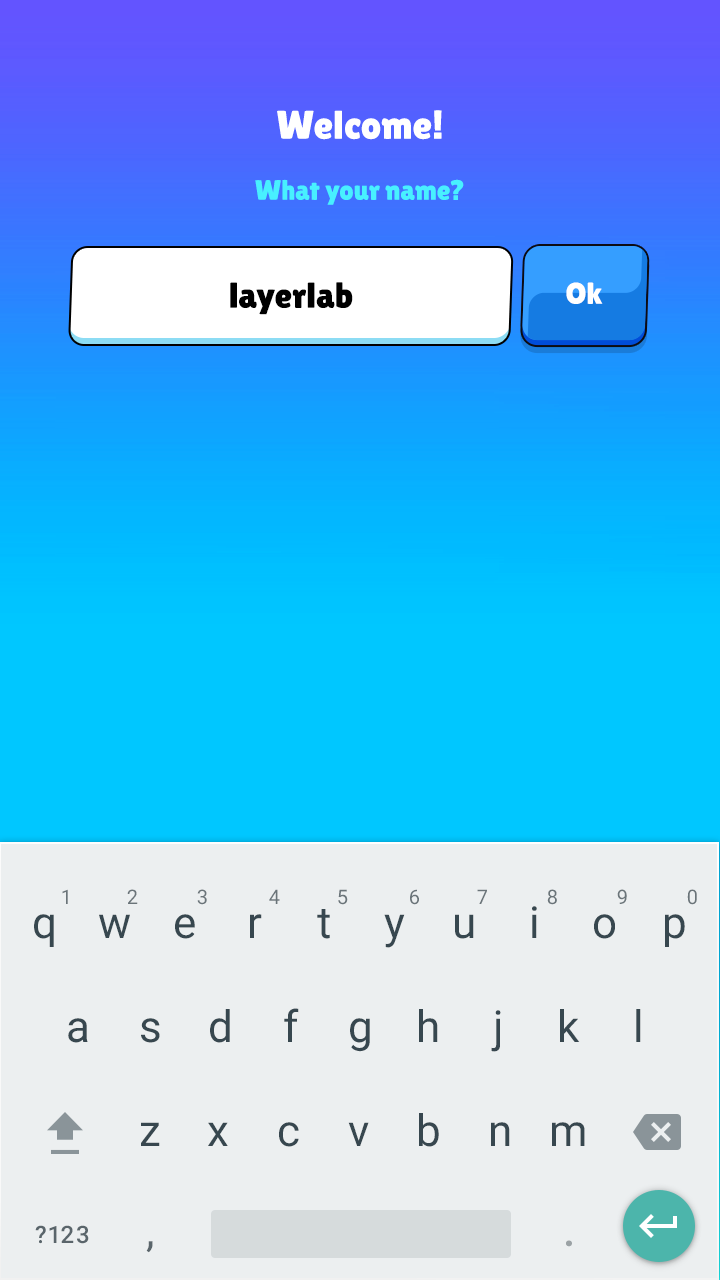
<style>
.page{position:relative;width:720px;height:1280px;background:#eceff0}
.page>*{position:absolute;margin:0}
.t1{font:40px "LilitaOne";color:#ffffff}
.t2{font:28px "LilitaOne";color:#48f0ff}
.t3{font:36px "LilitaOne";color:#000000}
.t4{font:30px "LilitaOne";color:#ffffff}
</style>
<div class="page">
<p class="t1" style="left:277px;top:110px;width:165px;height:30px">Welcome!</p>
<p class="t2" style="left:255px;top:179px;width:209px;height:26px">What your name?</p>
<p class="t3" style="left:230px;top:282px;width:123px;height:33px">layerlab</p>
<p class="t4" style="left:566px;top:282px;width:37px;height:22px">Ok</p>
</div>
